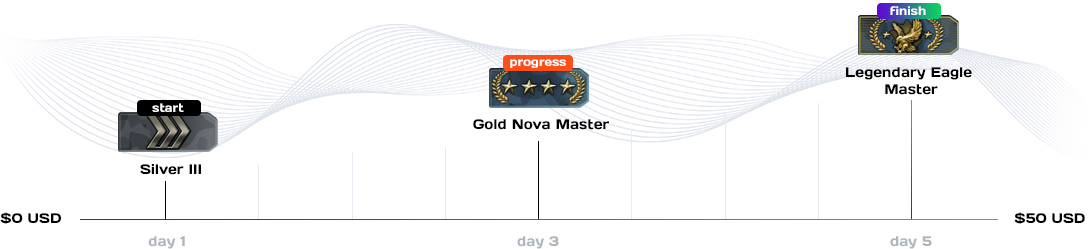
<style>
.page{position:relative;width:1089px;height:249px;background:#ffffff}
.page>*{position:absolute;margin:0}
.t1{font:12px "Days";color:#ffffff}
.t2{font:14px "Days";color:#000000}
.t3{font:14px "Days";color:#b0b5be}
</style>
<div class="page">
<p class="t1" style="left:890px;top:6px;width:36px;height:9px">finish</p>
<p class="t1" style="left:510px;top:59px;width:56px;height:9px">progress</p>
<p class="t2" style="left:846px;top:67px;width:126px;height:28px;text-align:center">Legendary Eagle <br>Master</p>
<p class="t1" style="left:152px;top:103px;width:32px;height:9px">start</p>
<p class="t2" style="left:473px;top:119px;width:136px;height:11px">Gold Nova Master</p>
<p class="t2" style="left:140px;top:164px;width:61px;height:11px">Silver III</p>
<p class="t2" style="left:0px;top:212px;width:61px;height:12px">$0 USD</p>
<p class="t2" style="left:1014px;top:212px;width:71px;height:12px">$50 USD</p>
<p class="t3" style="left:148px;top:236px;width:37px;height:13px">day 1</p>
<p class="t3" style="left:517px;top:236px;width:42px;height:13px">day 3</p>
<p class="t3" style="left:890px;top:236px;width:42px;height:13px">day 5</p>
</div>
